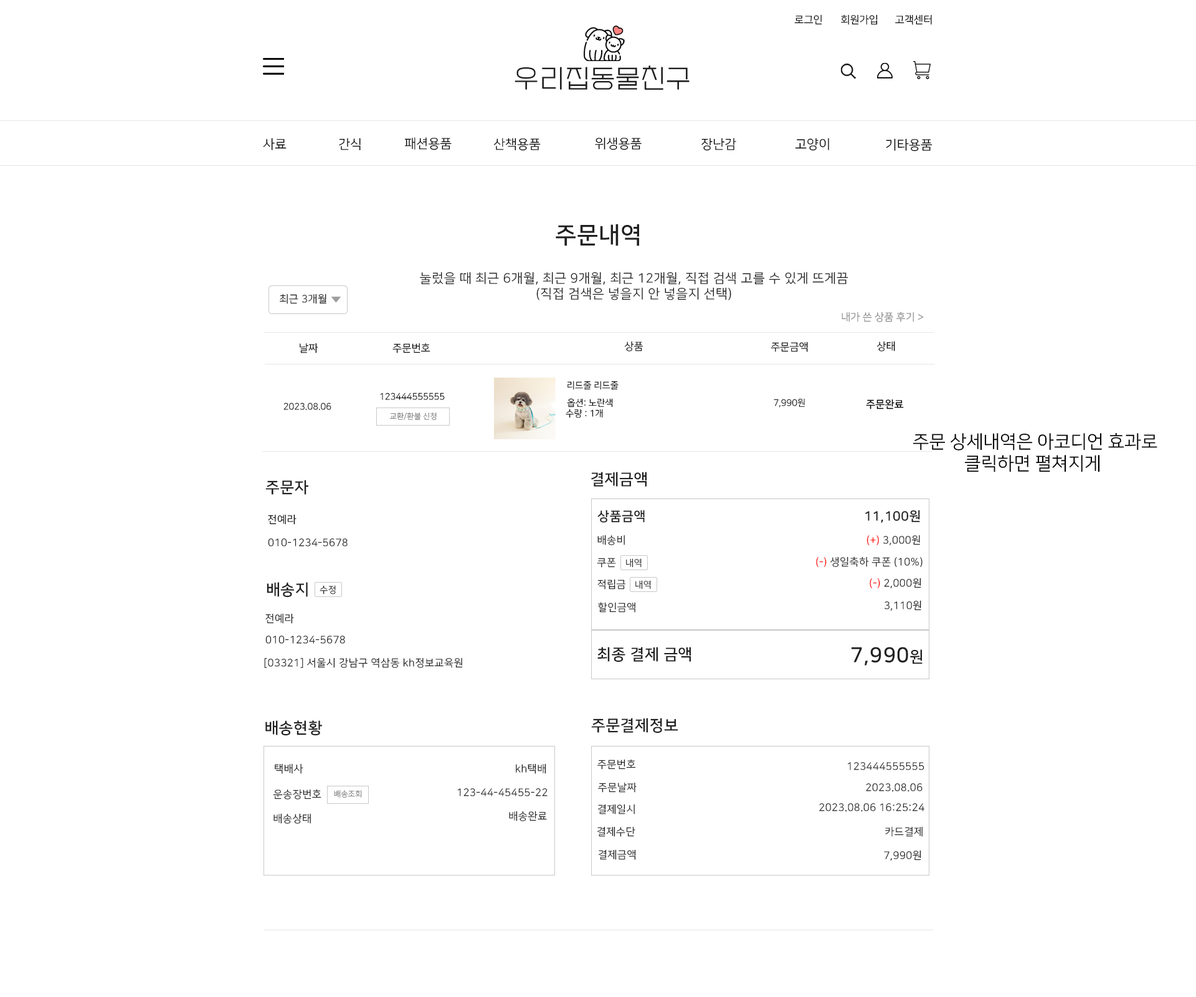
<style>
.page{position:relative;width:1196px;height:997px;background:#ffffff}
.page>*{position:absolute;margin:0}
.t1{font:10.4px "NanumSquareR";color:#000000}
.t2{font:26px "EF_watermelonSalad";letter-spacing:0.025em;color:#202020}
.t3{font:13px "NanumSquareR";color:#000000}
.t4{font:23.4px "NanumSquareB";letter-spacing:0.025em;color:#202020}
.t5{font:13px "NanumSquareR";letter-spacing:0.025em;color:#202020}
.t6{font:10.4px "NanumSquareR";letter-spacing:0.025em;color:#202020}
.t7{font:10.4px "NanumSquareR";color:#898989}
.t8{font:9.1px "NanumSquareR";color:#000000}
.t9{font:10.4px "NanumSquareB";color:#000000}
.t10{font:7.8px "NanumSquareR";color:#898989}
.t11{font:18.2px "NanumSquareR";color:#000000}
.t12{font:15.6px "NanumSquareB";letter-spacing:0.025em;color:#202020}
.t13{font:13px "NanumSquareB";letter-spacing:0.025em;color:#202020}
.t14{font:10.4px "NanumSquareR";letter-spacing:0.025em;color:#000000}
.t15{font:10.4px "NanumSquareR";letter-spacing:0.025em;color:#ff0000}
.t16{font:9.1px "NanumSquareR";letter-spacing:0.025em;color:#202020}
.t17{font:20.8px "NanumSquareB";letter-spacing:0.025em;color:#202020}
</style>
<div class="page">
<p class="t1" style="left:794px;top:14px;width:28px;height:11px">로그인</p>
<p class="t1" style="left:841px;top:14px;width:37px;height:11px">회원가입</p>
<p class="t1" style="left:895px;top:14px;width:37px;height:11px">고객센터</p>
<p class="t2" style="left:515px;top:65px;width:175px;height:25px">우리집동물친구</p>
<p class="t3" style="left:263px;top:138px;width:24px;height:12px">사료</p>
<p class="t3" style="left:339px;top:138px;width:22px;height:13px">간식</p>
<p class="t3" style="left:404px;top:137px;width:48px;height:13px">패션용품</p>
<p class="t3" style="left:493px;top:138px;width:48px;height:13px">산책용품</p>
<p class="t3" style="left:595px;top:137px;width:47px;height:13px">위생용품</p>
<p class="t3" style="left:702px;top:138px;width:34px;height:13px">장난감</p>
<p class="t3" style="left:795px;top:138px;width:34px;height:13px">고양이</p>
<p class="t3" style="left:886px;top:138px;width:47px;height:13px">기타용품</p>
<p class="t4" style="left:556px;top:224px;width:83px;height:22px">주문내역</p>
<p class="t5" style="left:420px;top:272px;width:429px;height:28px;text-align:center">눌렀을 때 최근 6개월, 최근 9개월, 최근 12개월, 직접 검색 고를 수 있게 뜨게끔<br>(직접 검색은 넣을지 안 넣을지 선택)</p>
<p class="t6" style="left:280px;top:293px;width:46px;height:11px">최근 3개월</p>
<p class="t7" style="left:842px;top:312px;width:82px;height:10px">내가 쓴 상품 후기 &gt;</p>
<p class="t1" style="left:624px;top:341px;width:20px;height:10px">상품</p>
<p class="t1" style="left:771px;top:341px;width:37px;height:11px">주문금액</p>
<p class="t1" style="left:877px;top:341px;width:18px;height:10px">상태</p>
<p class="t1" style="left:300px;top:343px;width:18px;height:10px">날짜</p>
<p class="t1" style="left:393px;top:343px;width:38px;height:10px">주문번호</p>
<p class="t8" style="left:568px;top:381px;width:51px;height:9px">리드줄 리드줄</p>
<p class="t8" style="left:380px;top:393px;width:65px;height:7px">123444555555</p>
<p class="t8" style="left:566px;top:398px;width:47px;height:20px;text-align:center">옵션: 노란색<br>수량 : 1개</p>
<p class="t8" style="left:774px;top:398px;width:31px;height:9px">7,990원</p>
<p class="t9" style="left:866px;top:399px;width:38px;height:10px">주문완료</p>
<p class="t8" style="left:283px;top:402px;width:48px;height:8px">2023.08.06</p>
<p class="t10" style="left:389px;top:412px;width:48px;height:9px">교환/환불 신청</p>
<p class="t11" style="left:913px;top:432px;width:245px;height:40px;text-align:center">주문 상세내역은 아코디언 효과로<br>클릭하면 펼쳐지게</p>
<p class="t12" style="left:591px;top:472px;width:56px;height:15px">결제금액</p>
<p class="t12" style="left:265px;top:480px;width:43px;height:15px">주문자</p>
<p class="t13" style="left:597px;top:510px;width:48px;height:13px">상품금액</p>
<p class="t13" style="left:865px;top:510px;width:55px;height:13px">11,100원</p>
<p class="t14" style="left:268px;top:514px;width:29px;height:11px">전예라</p>
<p class="t6" style="left:268px;top:538px;width:80px;height:8px">010-1234-5678</p>
<p class="t6" style="left:597px;top:535px;width:28px;height:10px">배송비</p>
<p class="t6" style="left:867px;top:535px;width:53px;height:11px"><span class="t15">(+)</span> 3,000원</p>
<p class="t6" style="left:597px;top:558px;width:19px;height:10px">쿠폰</p>
<p class="t6" style="left:816px;top:556px;width:107px;height:11px">(-) 생일축하 쿠폰 (10%)</p>
<p class="t16" style="left:626px;top:558px;width:16px;height:10px">내역</p>
<p class="t12" style="left:267px;top:582px;width:41px;height:15px">배송지</p>
<p class="t6" style="left:597px;top:579px;width:29px;height:10px">적립금</p>
<p class="t16" style="left:635px;top:580px;width:16px;height:9px">내역</p>
<p class="t6" style="left:870px;top:578px;width:51px;height:11px"><span class="t15">(-)</span> 2,000원</p>
<p class="t16" style="left:320px;top:585px;width:16px;height:9px">수정</p>
<p class="t6" style="left:598px;top:602px;width:37px;height:10px">할인금액</p>
<p class="t6" style="left:884px;top:600px;width:37px;height:11px">3,110원</p>
<p class="t6" style="left:265px;top:613px;width:29px;height:11px">전예라</p>
<p class="t6" style="left:265px;top:635px;width:80px;height:9px">010-1234-5678</p>
<p class="t12" style="left:597px;top:647px;width:94px;height:15px">최종 결제 금액</p>
<p class="t17" style="left:852px;top:647px;width:71px;height:18px">7,990<span class="t12">원</span></p>
<p class="t6" style="left:264px;top:657px;width:199px;height:11px">[03321] 서울시 강남구 역삼동 kh정보교육원</p>
<p class="t12" style="left:265px;top:720px;width:57px;height:16px">배송현황</p>
<p class="t12" style="left:591px;top:718px;width:87px;height:15px">주문결제정보</p>
<p class="t6" style="left:597px;top:759px;width:39px;height:10px">주문번호</p>
<p class="t6" style="left:848px;top:762px;width:77px;height:8px">123444555555</p>
<p class="t6" style="left:275px;top:763px;width:28px;height:11px">택배사</p>
<p class="t6" style="left:516px;top:763px;width:30px;height:11px">kh택배</p>
<p class="t6" style="left:598px;top:782px;width:39px;height:10px">주문날짜</p>
<p class="t6" style="left:866px;top:783px;width:57px;height:9px">2023.08.06</p>
<p class="t6" style="left:273px;top:789px;width:48px;height:10px">운송장번호</p>
<p class="t10" style="left:334px;top:790px;width:28px;height:8px">배송조회</p>
<p class="t6" style="left:457px;top:788px;width:91px;height:8px">123-44-45455-22</p>
<p class="t6" style="left:597px;top:804px;width:38px;height:10px">결제일시</p>
<p class="t6" style="left:819px;top:803px;width:106px;height:9px">2023.08.06 16:25:24</p>
<p class="t6" style="left:274px;top:813px;width:37px;height:11px">배송상태</p>
<p class="t6" style="left:509px;top:811px;width:38px;height:10px">배송완료</p>
<p class="t6" style="left:597px;top:826px;width:38px;height:11px">결제수단</p>
<p class="t6" style="left:885px;top:826px;width:38px;height:11px">카드결제</p>
<p class="t6" style="left:598px;top:849px;width:38px;height:11px">결제금액</p>
<p class="t6" style="left:884px;top:850px;width:37px;height:11px">7,990원</p>
</div>
